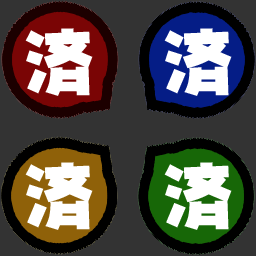
<style>
.page{position:relative;width:256px;height:256px;background:#333333}
.page>*{position:absolute;margin:0}
.t1{font:68.3px "NIS-JYA-U-83pv-RKSJ-H";color:#ffffff}
</style>
<div class="page">
<p class="t1" style="left:25px;top:28px;width:68px;height:68px">済</p>
<p class="t1" style="left:164px;top:28px;width:68px;height:68px">済</p>
<p class="t1" style="left:25px;top:162px;width:68px;height:68px">済</p>
<p class="t1" style="left:164px;top:162px;width:68px;height:68px">済</p>
</div>
